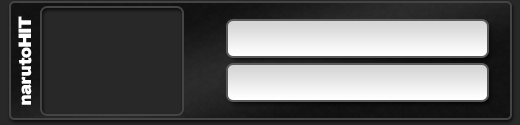
<style>
.page{position:relative;width:520px;height:125px;background:#282828}
.page>*{position:absolute;margin:0}
.t1{font:16px "BorisBlackBloxx";color:#ffffff}
</style>
<div class="page">
<p class="t1" style="left:18px;top:16px;width:14px;height:89px;rotate:-90deg">narutoHIT</p>
</div>
